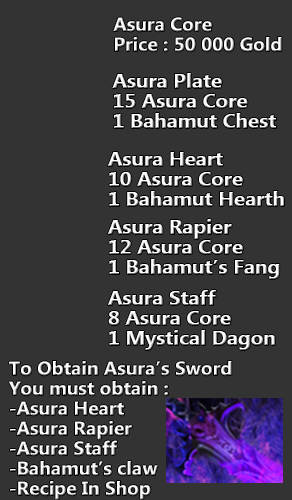
<style>
.page{position:relative;width:292px;height:500px;background:#333333}
.page>*{position:absolute;margin:0}
.t1{font:18.7px/20px "LaoUI-Bold";color:#ffffff;scale:1.03 1}
.t2{font:20px/20px "LaoUI-Bold";color:#ffffff;scale:1.03 1}
</style>
<div class="page">
<p class="t1" style="left:113px;top:17px;width:169px;height:35px;text-align:right">Asura Core <br>Price : 50 000 Gold</p>
<p class="t2" style="left:112px;top:73px;width:164px;height:55px;text-align:right">Asura Plate <br>15 Asura Core<br>1 Bahamut Chest</p>
<p class="t2" style="left:108px;top:152px;width:176px;height:54px;text-align:right">Asura Heart<br>10 Asura Core<br>1 Bahamut Hearth</p>
<p class="t2" style="left:108px;top:219px;width:172px;height:60px;text-align:right">Asura Rapier<br>12 Asura Core<br>1 Bahamut’s Fang</p>
<p class="t2" style="left:108px;top:290px;width:167px;height:60px;text-align:right">Asura Staff<br>8 Asura Core<br>1 Mystical Dagon</p>
<p class="t1" style="left:9px;top:361px;width:223px;height:139px;text-align:right">To Obtain Asura’s Sword<br>You must obtain :<br>-Asura Heart<br>-Asura Rapier<br>-Asura Staff<br>-Bahamut’s claw<br>-Recipe In Shop</p>
</div>
